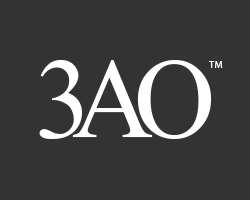
<style>
.page{position:relative;width:250px;height:200px;background:#333333}
.page>*{position:absolute;margin:0}
.t1{font:140px "Aparajita";letter-spacing:-0.14em;color:#ffffff}
.t2{font:10px "MyriadPro-Regular";color:#ffffff}
</style>
<div class="page">
<p class="t1" style="left:39px;top:60px;width:173px;height:79px">3AO</p>
<p class="t2" style="left:209px;top:61px;width:14px;height:7px">TM</p>
</div>
